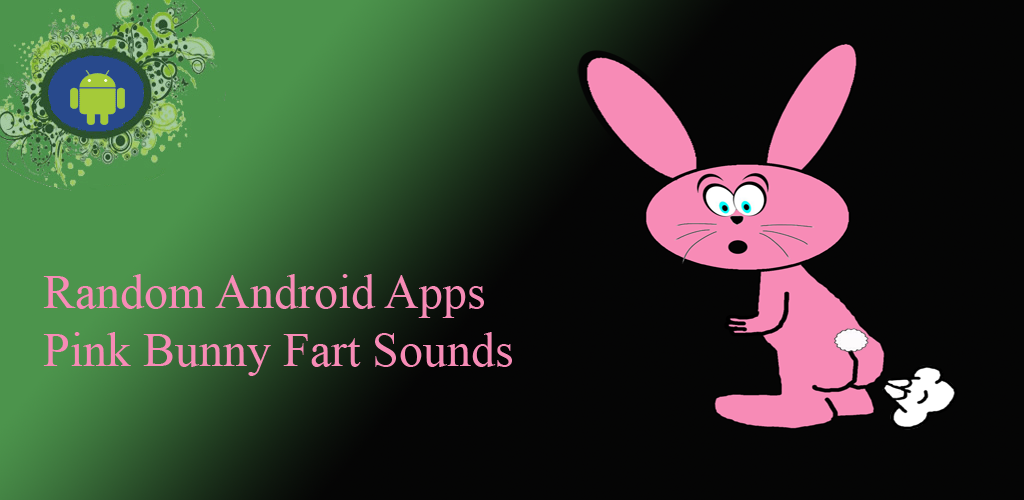
<style>
.page{position:relative;width:1024px;height:500px;background:#050505}
.page>*{position:absolute;margin:0}
.t1{font:48px "TimesNewRomanPSMT";color:#f78bb6}
</style>
<div class="page">
<p class="t1" style="left:43px;top:274px;width:469px;height:102px">Random Android Apps<br>Pink Bunny Fart Sounds</p>
</div>
